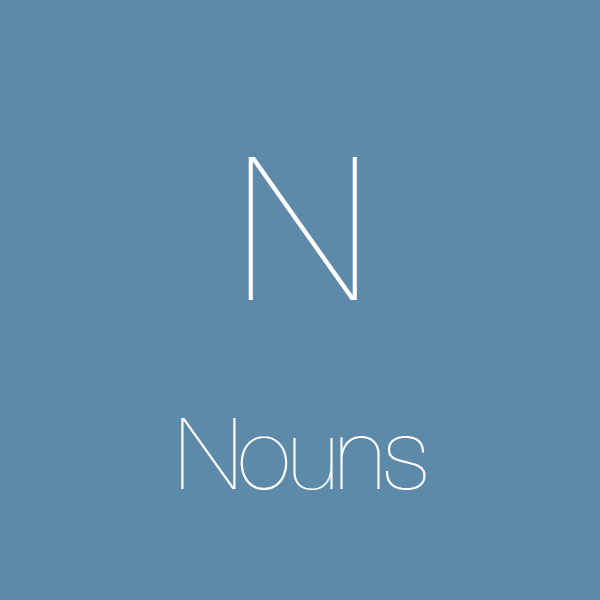
<style>
.page{position:relative;width:600px;height:600px;background:#5d8aa8}
.page>*{position:absolute;margin:0}
.t1{font:200px "HelveticaNeue-UltraLight";letter-spacing:-0.025em;color:#fdfeff}
.t2{font:100px "HelveticaNeue-UltraLight";letter-spacing:-0.025em;color:#fdfeff}
</style>
<div class="page">
<p class="t1" style="left:248px;top:157px;width:109px;height:143px">N</p>
<p class="t2" style="left:181px;top:418px;width:245px;height:72px">Nouns</p>
</div>
